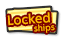
<style>
.page{position:relative;width:65px;height:41px;background:#ffffff}
.page>*{position:absolute;margin:0}
.t1{font:12px/8px "UDShinGoPro-DeBold";color:#ffba00}
.t2{font:8px/8px "UDShinGoPro-DeBold";color:#ffba00}
</style>
<div class="page">
<p class="t1" style="left:7px;top:12px;width:48px;height:21px;text-align:center;rotate:-4deg">Locked<br><span class="t2">           ships</span></p>
</div>
